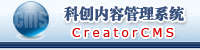
<style>
.page{position:relative;width:200px;height:50px}
.page>*{position:absolute;margin:0}
.t1{font:15px "FZCSJW--GB1-0";color:#37507c}
.t2{font:17.7px "04b25"}
.t3{font:12px "Verdana";letter-spacing:0.3em;color:#d90000}
</style>
<div class="page">
<p class="t1" style="left:64px;top:6px;width:120px;height:16px">科创内容管理系统</p>
<p class="t2" style="left:14px;top:11px;width:34px;height:17px">CMS</p>
<p class="t3" style="left:72px;top:28px;width:102px;height:9px">CreatorCMS</p>
</div>
